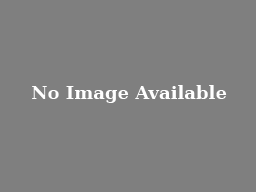
<style>
.page{position:relative;width:256px;height:192px;background:#7f7f7f}
.page>*{position:absolute;margin:0}
.t1{font:18px "BitstreamVeraSerif-Bold";color:#ffffff}
</style>
<div class="page">
<p class="t1" style="left:32px;top:85px;width:195px;height:18px">No Image Available</p>
</div>
